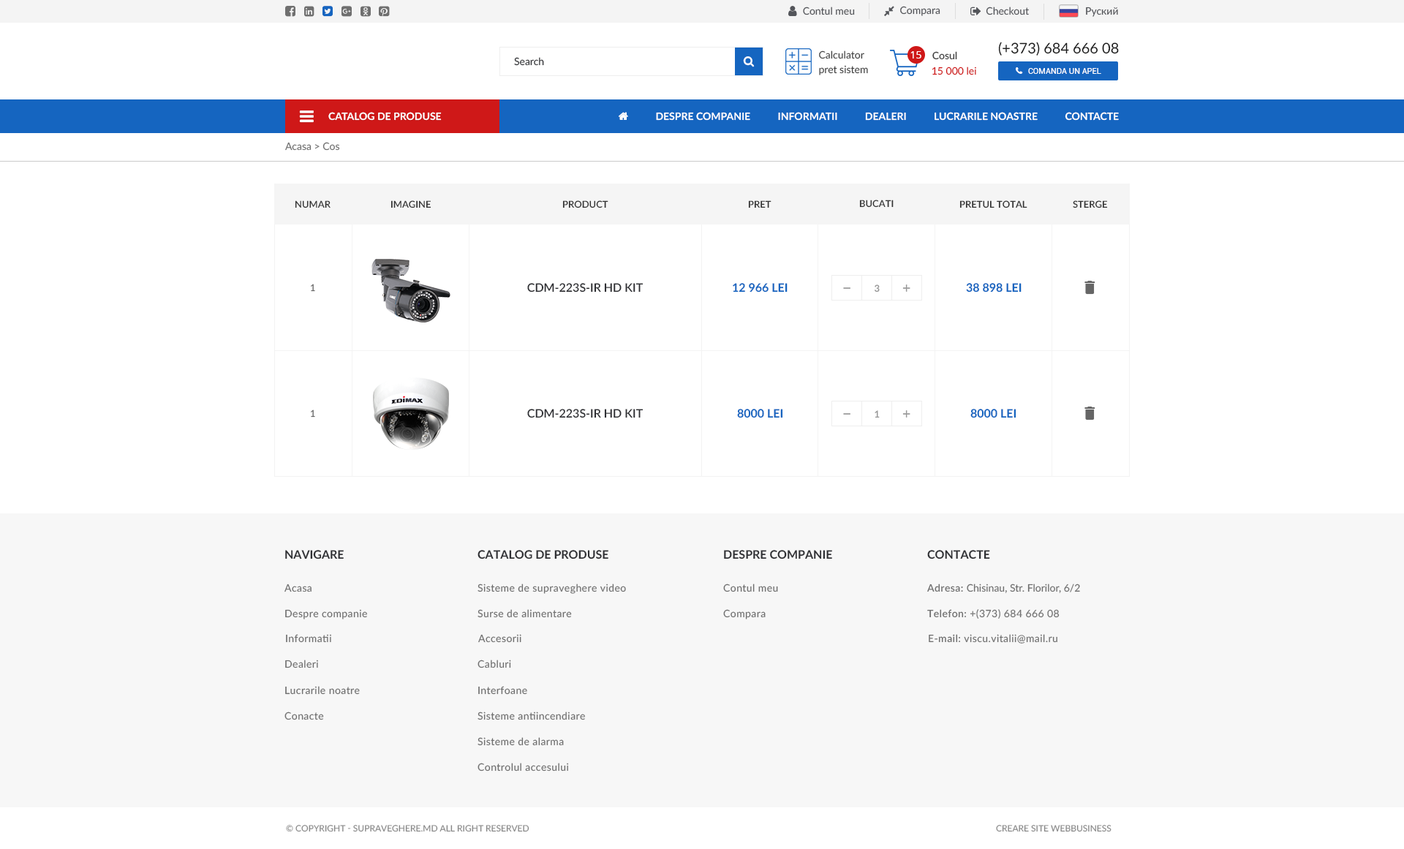
<style>
.page{position:relative;width:1404px;height:849px;background:#ffffff}
.page>*{position:absolute;margin:0}
.t1{font:10.2px "Lato-Regular";color:#53555a}
.t2{font:14.6px "Lato-Regular";color:#1a1a1a}
.t3{font:10.2px/14.6px "Lato-Regular";color:#444444}
.t4{font:10.2px "OpenSans";color:#ffffff}
.t5{font:10.2px "Lato-Semibold";color:#444444}
.t6{font:10.2px "Lato-Regular";color:#2f3034}
.t7{font:10.2px "Lato-Regular";color:#cf1818}
.t8{font:10.2px "Lato-Bold";color:#ffffff;text-transform:uppercase}
.t9{font:10.2px "Lato-Regular";color:#6f6f6f}
.t10{font:9.5px "Lato-Semibold";color:#333333;text-transform:uppercase}
.t11{font:9.5px "Lato-Regular";color:#666666}
.t12{font:11.7px "Lato-Semibold";color:#2f3034}
.t13{font:11.7px "Lato-Bold";color:#1565c0;text-transform:uppercase}
.t14{font:9.5px "Lato-Bold";color:#999999;text-transform:uppercase}
.t15{font:11.7px "Lato-Bold";color:#2f3034;text-transform:uppercase}
.t16{font:10.2px "Lato-Regular";letter-spacing:0.03em;color:#6f6f6f}
.t17{font:10.2px "Lato-Semibold";letter-spacing:0.03em;color:#6f6f6f}
.t18{font:8.8px "Lato-Regular";color:#888888;text-transform:uppercase}
</style>
<div class="page">
<p class="t1" style="left:900px;top:6px;width:41px;height:10px">Compara</p>
<p class="t1" style="left:803px;top:7px;width:52px;height:8px">Contul meu</p>
<p class="t1" style="left:986px;top:7px;width:43px;height:8px">Checkout</p>
<p class="t1" style="left:1086px;top:7px;width:32px;height:10px">Руский</p>
<p class="t2" style="left:998px;top:42px;width:121px;height:14px">(+373) 684 666 08</p>
<p class="t3" style="left:819px;top:50px;width:49px;height:25px">Calculator<br>pret sistem</p>
<p class="t4" style="left:911px;top:51px;width:11px;height:8px">15</p>
<p class="t5" style="left:933px;top:51px;width:24px;height:9px">Cosul</p>
<p class="t6" style="left:514px;top:57px;width:30px;height:9px">Search</p>
<p class="t7" style="left:932px;top:67px;width:44px;height:8px">15 000 lei</p>
<p class="t8" style="left:328px;top:112px;width:114px;height:9px">catalog de produse</p>
<p class="t9" style="left:285px;top:142px;width:55px;height:9px">Acasa &gt; Cos</p>
<p class="t10" style="left:295px;top:200px;width:36px;height:8px">Numar</p>
<p class="t10" style="left:391px;top:200px;width:41px;height:8px">imagine</p>
<p class="t10" style="left:562px;top:200px;width:47px;height:8px">Product</p>
<p class="t10" style="left:748px;top:200px;width:24px;height:8px">pret</p>
<p class="t10" style="left:859px;top:200px;width:35px;height:8px">bucati</p>
<p class="t10" style="left:960px;top:200px;width:68px;height:8px">pretul total</p>
<p class="t10" style="left:1073px;top:200px;width:35px;height:8px">sterge</p>
<p class="t11" style="left:311px;top:284px;width:4px;height:8px">1</p>
<p class="t12" style="left:527px;top:283px;width:117px;height:10px">CDM-223S-IR HD KIT</p>
<p class="t13" style="left:733px;top:283px;width:55px;height:10px">12 966 lei</p>
<p class="t14" style="left:875px;top:285px;width:5px;height:8px">3</p>
<p class="t13" style="left:966px;top:283px;width:56px;height:10px">38 898 lei</p>
<p class="t11" style="left:311px;top:410px;width:4px;height:8px">1</p>
<p class="t12" style="left:527px;top:409px;width:117px;height:9px">CDM-223S-IR HD KIT</p>
<p class="t13" style="left:737px;top:409px;width:46px;height:9px">8000 lei</p>
<p class="t14" style="left:875px;top:410px;width:5px;height:8px">1</p>
<p class="t13" style="left:971px;top:409px;width:46px;height:9px">8000 lei</p>
<p class="t15" style="left:285px;top:550px;width:59px;height:10px">navigare</p>
<p class="t15" style="left:478px;top:550px;width:131px;height:10px">Catalog de produse</p>
<p class="t15" style="left:724px;top:550px;width:108px;height:10px">Despre companie</p>
<p class="t15" style="left:927px;top:550px;width:63px;height:10px">Contacte</p>
<p class="t16" style="left:285px;top:584px;width:27px;height:8px">Acasa</p>
<p class="t16" style="left:478px;top:584px;width:148px;height:10px">Sisteme de supraveghere video</p>
<p class="t16" style="left:723px;top:584px;width:55px;height:8px">Contul meu</p>
<p class="t9" style="left:927px;top:584px;width:153px;height:9px"><span class="t17">Adresa: </span>Chisinau, Str. Florilor, 6/2</p>
<p class="t16" style="left:285px;top:609px;width:82px;height:10px">Despre companie</p>
<p class="t16" style="left:478px;top:609px;width:94px;height:9px">Surse de alimentare</p>
<p class="t16" style="left:723px;top:609px;width:43px;height:10px">Compara</p>
<p class="t16" style="left:927px;top:609px;width:133px;height:10px"><span class="t17">Telefon:</span> +(373) 684 666 08</p>
<p class="t16" style="left:286px;top:634px;width:45px;height:9px">Informatii</p>
<p class="t16" style="left:478px;top:634px;width:43px;height:9px">Accesorii</p>
<p class="t16" style="left:929px;top:634px;width:129px;height:10px"><span class="t17">E-mail:</span> viscu.vitalii@mail.ru</p>
<p class="t16" style="left:285px;top:660px;width:33px;height:8px">Dealeri</p>
<p class="t16" style="left:478px;top:660px;width:33px;height:8px">Cabluri</p>
<p class="t16" style="left:285px;top:686px;width:75px;height:9px">Lucrarile noatre</p>
<p class="t16" style="left:478px;top:686px;width:49px;height:9px">Interfoane</p>
<p class="t16" style="left:285px;top:712px;width:39px;height:8px">Conacte</p>
<p class="t16" style="left:478px;top:712px;width:107px;height:8px">Sisteme antiincendiare</p>
<p class="t16" style="left:478px;top:737px;width:86px;height:9px">Sisteme de alarma</p>
<p class="t16" style="left:478px;top:763px;width:91px;height:9px">Controlul accesului</p>
<p class="t18" style="left:286px;top:825px;width:244px;height:7px">© Copyright - supraveghere.md all right reserved</p>
<p class="t18" style="left:996px;top:825px;width:116px;height:7px">Creare site WebBusiness</p>
</div>
